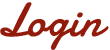
<style>
.page{position:relative;width:110px;height:50px;background:#ffffff}
.page>*{position:absolute;margin:0}
.t1{font:48px "Damion";color:#931b0c}
</style>
<div class="page">
<p class="t1" style="left:0px;top:2px;width:109px;height:48px">Login</p>
</div>
